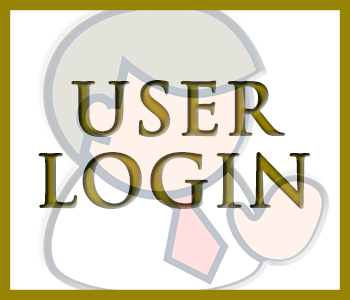
<style>
.page{position:relative;width:350px;height:300px;background:#ffffff}
.page>*{position:absolute;margin:0}
.t1{font:70px/72px "TrajanPro-Bold";letter-spacing:0.015em;font-weight:bold}
</style>
<div class="page">
<p class="t1" style="left:38px;top:80px;width:273px;height:129px;text-align:center">USER <br>LOGIN</p>
</div>
